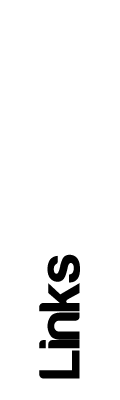
<style>
.page{position:relative;width:120px;height:400px;background:#ffffff}
.page>*{position:absolute;margin:0}
.t1{font:60px "Harabara-Bold";color:#010101}
</style>
<div class="page">
<p class="t1" style="left:39px;top:254px;width:41px;height:125px;rotate:-90deg">Links</p>
</div>
